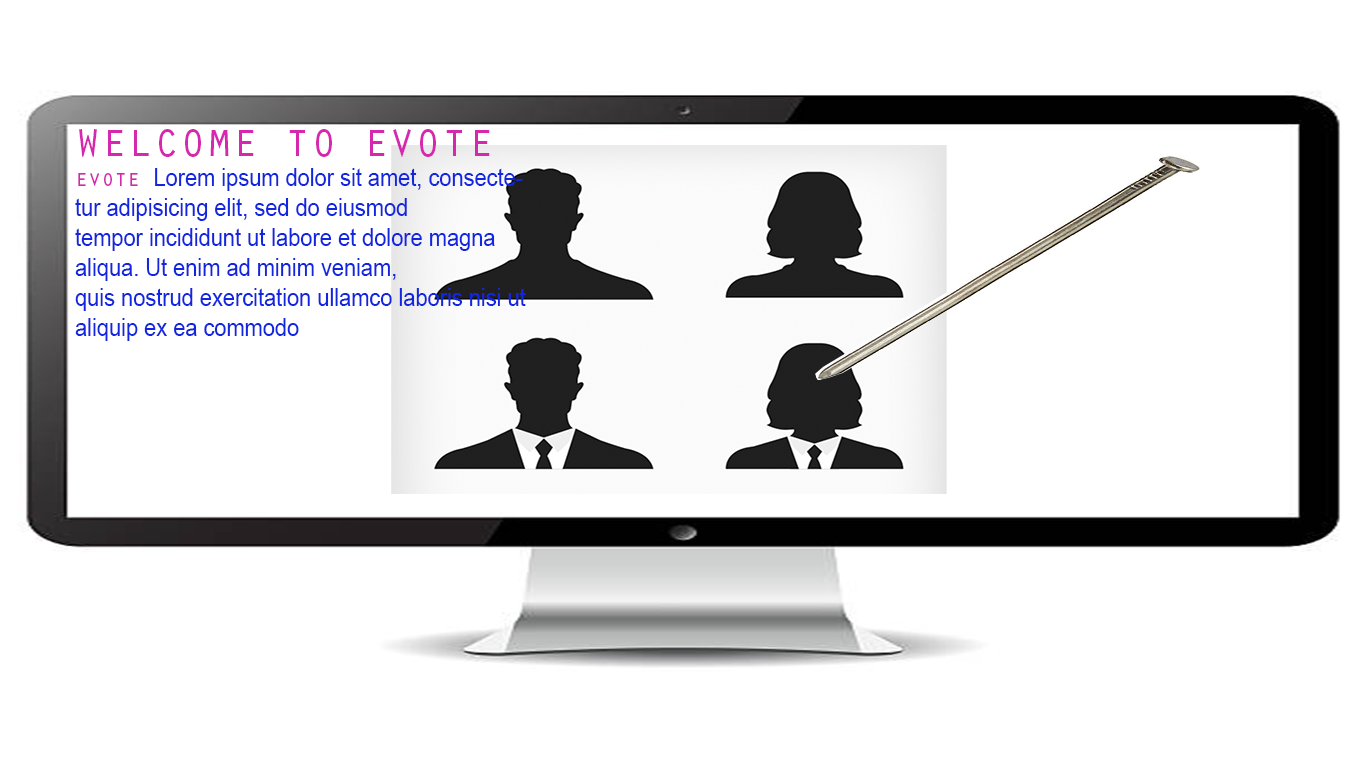
<style>
.page{position:relative;width:1366px;height:768px;background:#ffffff}
.page>*{position:absolute;margin:0}
.t1{font:25px "ArialMT";color:#1326df;scale:0.87 1}
.t2{font:50px "OratorStd";color:#d628af;scale:0.87 1}
.t3{font:25px "OratorStd";color:#d628af;scale:0.87 1}
</style>
<div class="page">
<p class="t1" style="left:75px;top:129px;width:451px;height:212px"><span class="t2">welcome to evote<br></span><span class="t3">evote </span>Lorem ipsum dolor sit amet, consectetur adipisicing elit, sed do eiusmod<br>tempor incididunt ut labore et dolore magna aliqua. Ut enim ad minim veniam,<br>quis nostrud exercitation ullamco laboris nisi ut aliquip ex ea commodo</p>
</div>
